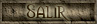
<style>
.page{position:relative;width:97px;height:24px}
.page>*{position:absolute;margin:0}
.t1{font:19.1px "Morpheus";color:#2d1a02}
</style>
<div class="page">
<p class="t1" style="left:26px;top:4px;width:45px;height:17px">Salir</p>
</div>
